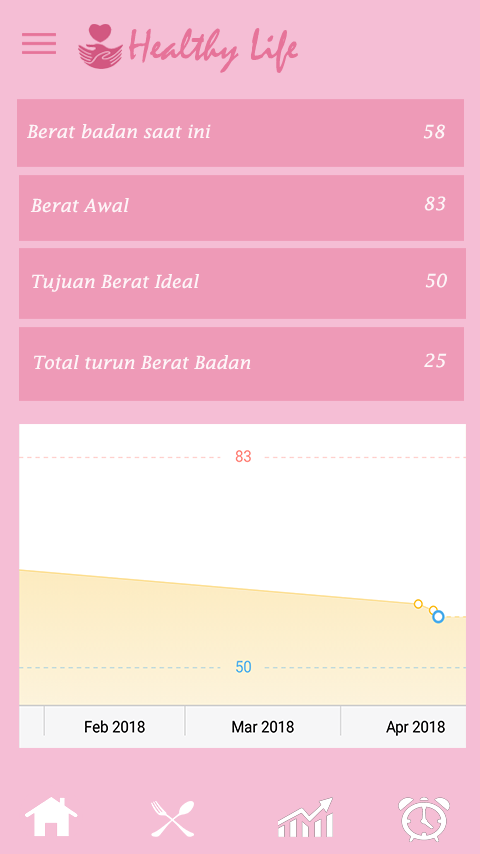
<style>
.page{position:relative;width:480px;height:854px;background:#f5bed5}
.page>*{position:absolute;margin:0}
.t1{font:45.2px "Mistral";color:#e67399}
.t2{font:18px "LucidaFax-Italic";color:#fdf5f8}
</style>
<div class="page">
<p class="t1" style="left:129px;top:28px;width:169px;height:45px">Healthy Life</p>
<p class="t2" style="left:27px;top:124px;width:184px;height:15px">Berat badan saat ini</p>
<p class="t2" style="left:423px;top:124px;width:22px;height:15px">58</p>
<p class="t2" style="left:30px;top:198px;width:99px;height:15px">Berat Awal</p>
<p class="t2" style="left:424px;top:196px;width:22px;height:15px">83</p>
<p class="t2" style="left:32px;top:274px;width:167px;height:18px">Tujuan Berat Ideal</p>
<p class="t2" style="left:425px;top:273px;width:22px;height:15px">50</p>
<p class="t2" style="left:424px;top:353px;width:23px;height:15px">25</p>
<p class="t2" style="left:34px;top:355px;width:217px;height:15px">Total turun Berat Badan</p>
</div>
